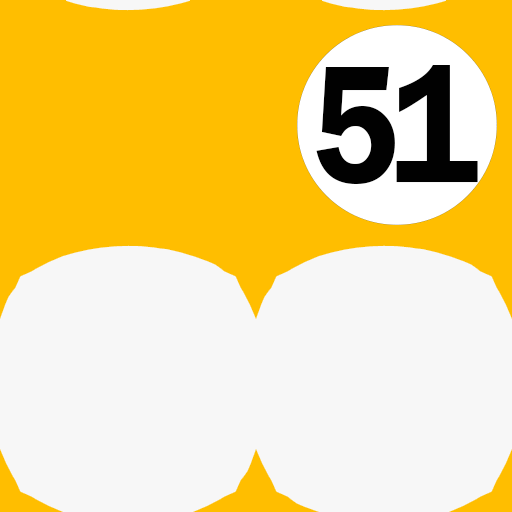
<style>
.page{position:relative;width:512px;height:512px;background:#f7f7f7}
.page>*{position:absolute;margin:0}
.t1{font:172.5px "FranklinGothic-Demi";letter-spacing:-0.05em;color:#010101;scale:0.87 1}
</style>
<div class="page">
<p class="t1" style="left:316px;top:65px;width:162px;height:119px">51</p>
</div>
